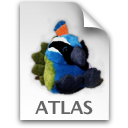
<style>
.page{position:relative;width:128px;height:128px;background:#ffffff}
.page>*{position:absolute;margin:0}
.t1{font:18px "LucidaGrande-Bold";letter-spacing:-0.02em;color:#656565}
</style>
<div class="page">
<p class="t1" style="left:35px;top:100px;width:58px;height:15px">ATLAS</p>
</div>
